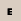
<style>
.page{position:relative;width:21px;height:21px;background:#d9cdc1}
.page>*{position:absolute;margin:0}
.t1{font:9px "Tahoma-Bold";color:#000000}
</style>
<div class="page">
<p class="t1" style="left:7px;top:8px;width:5px;height:7px">E</p>
</div>
